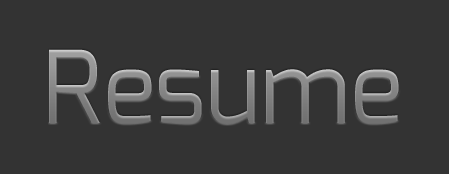
<style>
.page{position:relative;width:449px;height:174px;background:#333333}
.page>*{position:absolute;margin:0}
.t1{font:100px "Exo-Regular";color:#898989}
</style>
<div class="page">
<p class="t1" style="left:49px;top:49px;width:350px;height:75px">Resume</p>
</div>
